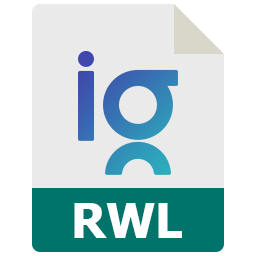
<style>
.page{position:relative;width:256px;height:256px;background:#eaeaea}
.page>*{position:absolute;margin:0}
.t1{font:48px "Tahoma-Bold";color:#ffffff}
</style>
<div class="page">
<p class="t1" style="left:74px;top:203px;width:108px;height:35px">RWL</p>
</div>
